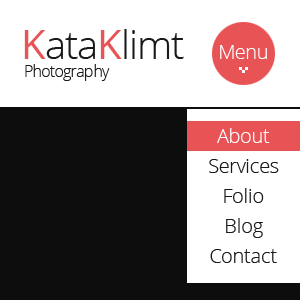
<style>
.page{position:relative;width:300px;height:300px;background:#ffffff}
.page>*{position:absolute;margin:0}
.t1{font:40px "OpenSans-Light";letter-spacing:-0.025em;color:#1a1a1a}
.t2{font:40px "OpenSans";letter-spacing:-0.025em;color:#e85356}
.t3{font:20px "OpenSans-Light";letter-spacing:-0.025em;color:#ffffff}
.t4{font:16px "OpenSans-Light";letter-spacing:-0.025em;color:#1a1a1a}
.t5{font:20px/30px "OpenSans-Light";letter-spacing:-0.025em;color:#1a1a1a}
</style>
<div class="page">
<p class="t1" style="left:24px;top:29px;width:160px;height:30px"><span class="t2">K</span>ata<span class="t2">K</span>limt</p>
<p class="t3" style="left:220px;top:45px;width:47px;height:14px">Menu</p>
<p class="t4" style="left:25px;top:64px;width:85px;height:17px">Photography</p>
<p class="t5" style="left:209px;top:128px;width:70px;height:135px;text-align:center">About<br>Services<br>Folio<br>Blog<br>Contact</p>
<p class="t5" style="left:209px;top:128px;width:70px;height:135px;text-align:center">About<br>Services<br>Folio<br>Blog<br>Contact</p>
</div>
